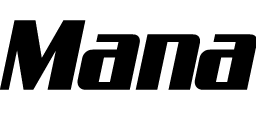
<style>
.page{position:relative;width:256px;height:128px;background:#ffffff}
.page>*{position:absolute;margin:0}
.t1{font:100.3px "Aero";letter-spacing:-0.04em;color:#000000}
</style>
<div class="page">
<p class="t1" style="left:0px;top:20px;width:257px;height:70px">Mana</p>
</div>
